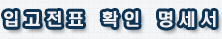
<style>
.page{position:relative;width:222px;height:39px;background:#f3f6f8}
.page>*{position:absolute;margin:0}
.t1{font:18px "ÇÑ¾ç°¡´ÂÇìµå¶óÀÎ";letter-spacing:0.2em;color:#f4f0f2}
</style>
<div class="page">
<p class="t1" style="left:4px;top:11px;width:212px;height:17px">입고전표 확인 명세서</p>
</div>
